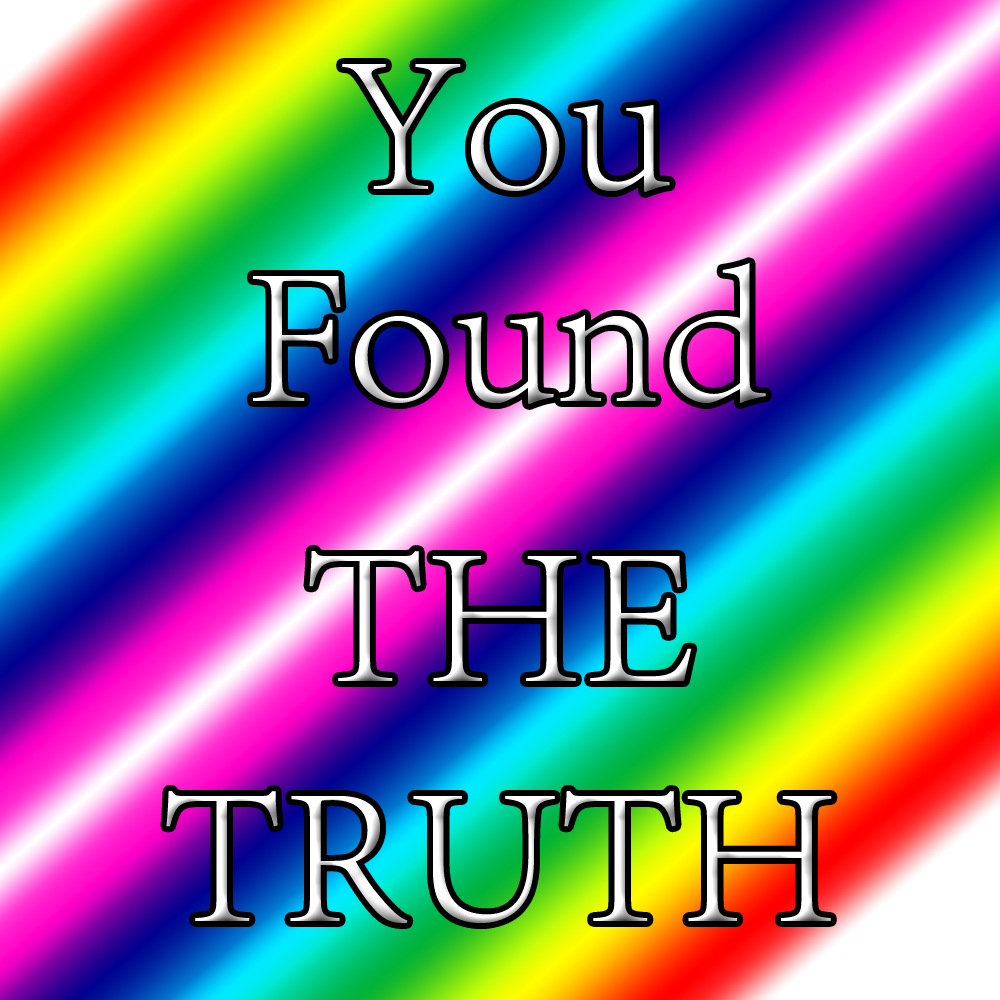
<style>
.page{position:relative;width:1000px;height:1000px}
.page>*{position:absolute;margin:0}
.t1{font:200px "AdobeSongStd-Light";color:#ffffff}
</style>
<div class="page">
<p class="t1" style="left:342px;top:64px;width:328px;height:128px">You</p>
<p class="t1" style="left:253px;top:263px;width:513px;height:141px">Found</p>
<p class="t1" style="left:166px;top:551px;width:666px;height:372px;text-align:center">THE TRUTH</p>
</div>
